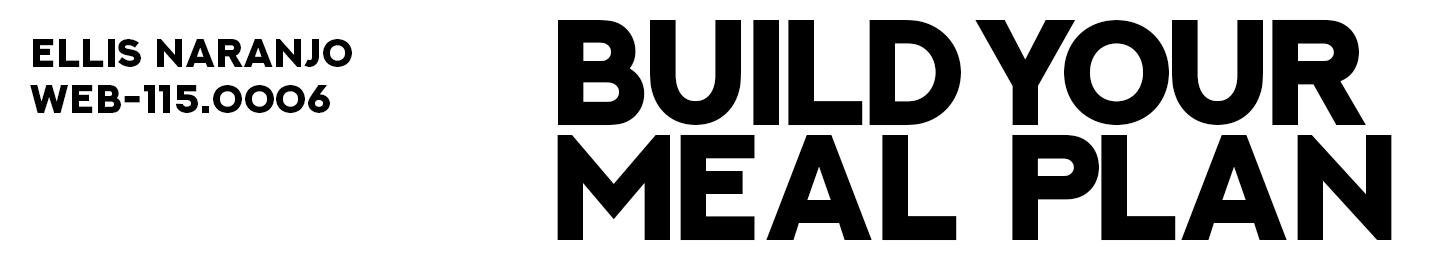
<style>
.page{position:relative;width:1440px;height:270px;background:#ffffff}
.page>*{position:absolute;margin:0}
.t1{font:147.1px/115px "NEXTART-Heavy";letter-spacing:0.02em;color:#000000}
.t2{font:147.1px/115px "NEXTART-Heavy";letter-spacing:-0.04em;color:#000000}
.t3{font:147.1px/115px "NEXTART-Heavy";letter-spacing:-0.06em;color:#000000}
.t4{font:147.1px/115px "NEXTART-Heavy";letter-spacing:-0.2em;color:#000000}
.t5{font:147.1px/115px "NEXTART-Heavy";letter-spacing:-0.1em;color:#000000}
.t6{font:147.1px/115px "NEXTART-Heavy";letter-spacing:0.04em;color:#000000}
.t7{font:40px "NEXTART-Heavy";letter-spacing:0.02em;color:#000000}
</style>
<div class="page">
<p class="t1" style="left:557px;top:19px;width:835px;height:222px;text-align:center"><span class="t2">BU</span><span class="t3">I</span><span class="t2">L</span><span class="t4">D </span><span class="t5">Y</span><span class="t3">OU</span>R <br><span class="t3">M</span><span class="t6">E</span>A<span class="t6">L </span><span class="t3">P</span>LAN</p>
<p class="t7" style="left:33px;top:39px;width:319px;height:28px">ELLIs nARANJO</p>
<p class="t7" style="left:30px;top:85px;width:300px;height:28px">Web-115.0006</p>
</div>
